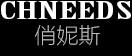
<style>
.page{position:relative;width:132px;height:56px;background:#000000}
.page>*{position:absolute;margin:0}
.t1{font:24.5px "BirchStd";color:#fefefe;scale:2.41 1}
.t2{font:22px "FZLTCXHJW--GB1-0";color:#bfbfbf}
</style>
<div class="page">
<p class="t1" style="left:1px;top:1px;width:130px;height:18px">CHNEEDS</p>
<p class="t2" style="left:34px;top:25px;width:66px;height:21px">俏妮斯</p>
</div>
